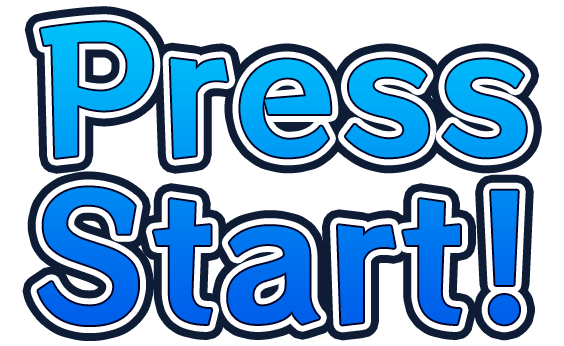
<style>
.page{position:relative;width:564px;height:346px;background:#ffffff}
.page>*{position:absolute;margin:0}
.t1{font:166.7px/166.7px "RocknRollOne-Regular";font-weight:bold}
</style>
<div class="page">
<p class="t1" style="left:38px;top:22px;width:488px;height:303px;text-align:center">Press<br>Start!</p>
</div>
